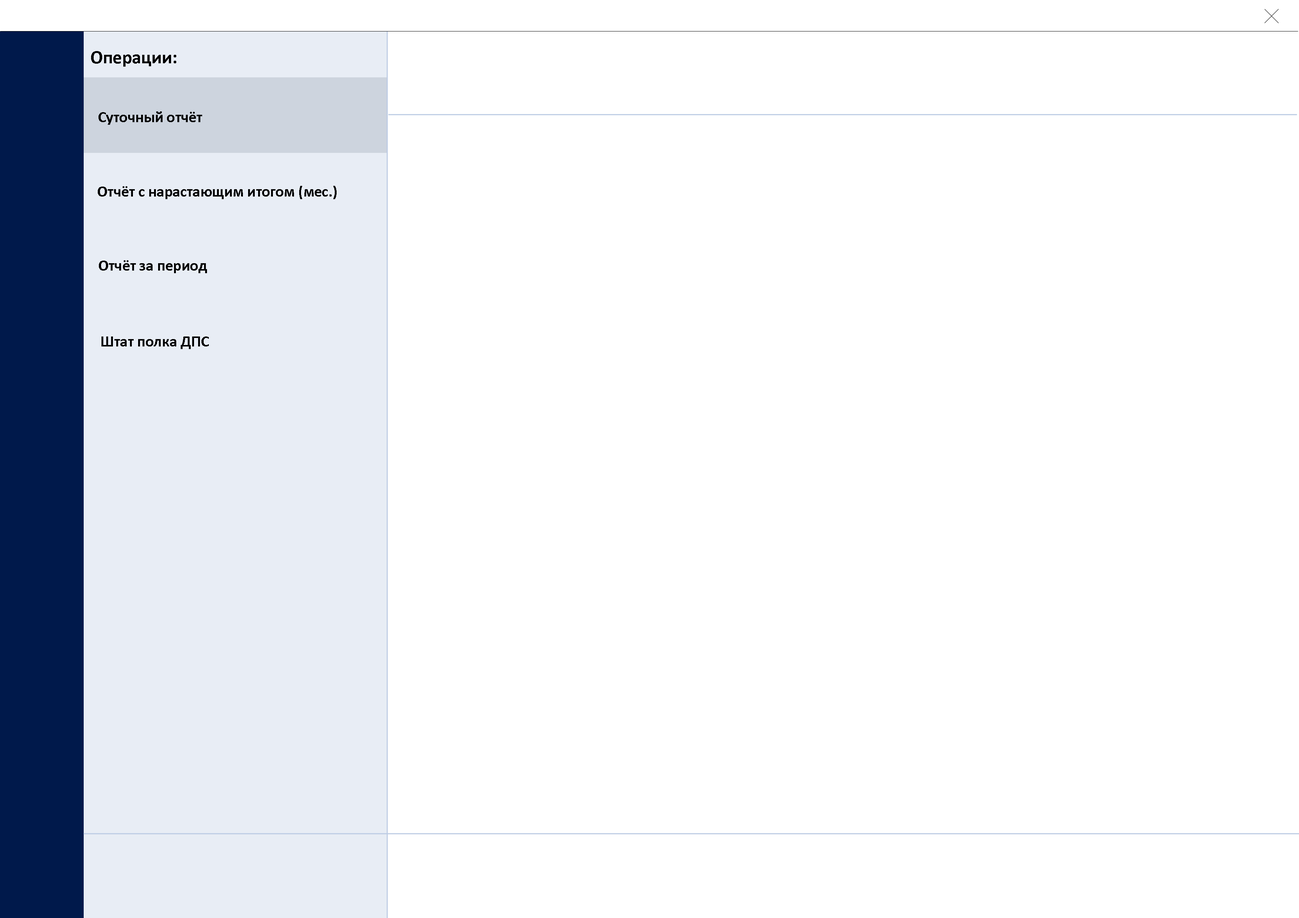
<style>
.page{position:relative;width:1299px;height:918px;background:#ffffff}
.page>*{position:absolute;margin:0}
.t1{font:18.5px "Calibri-Bold";color:#000000}
.t2{font:15.4px "Calibri-Bold";color:#000000}
</style>
<div class="page">
<p class="t1" style="left:91px;top:51px;width:85px;height:16px">Операции:</p>
<p class="t2" style="left:98px;top:111px;width:104px;height:14px">Суточный отчёт</p>
<p class="t2" style="left:98px;top:186px;width:239px;height:13px">Отчёт с нарастающим итогом (мес.)</p>
<p class="t2" style="left:99px;top:260px;width:108px;height:13px">Отчёт за период</p>
<p class="t2" style="left:101px;top:337px;width:108px;height:12px">Штат полка ДПС</p>
</div>
